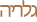
<style>
.page{position:relative;width:37px;height:22px;background:#ffffff}
.page>*{position:absolute;margin:0}
.t1{font:21.6px "MyriadHebrew-Regular";letter-spacing:-0.09em;color:#ad7344}
</style>
<div class="page">
<p class="t1" style="left:0px;top:0px;width:38px;height:17px">הירלג</p>
</div>
